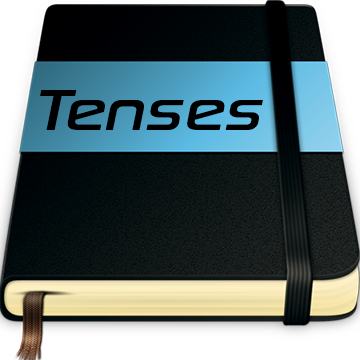
<style>
.page{position:relative;width:360px;height:360px}
.page>*{position:absolute;margin:0}
.t1{font:82.7px "SonySketchEF";color:#000000}
</style>
<div class="page">
<p class="t1" style="left:40px;top:90px;width:223px;height:40px">Tenses</p>
</div>
